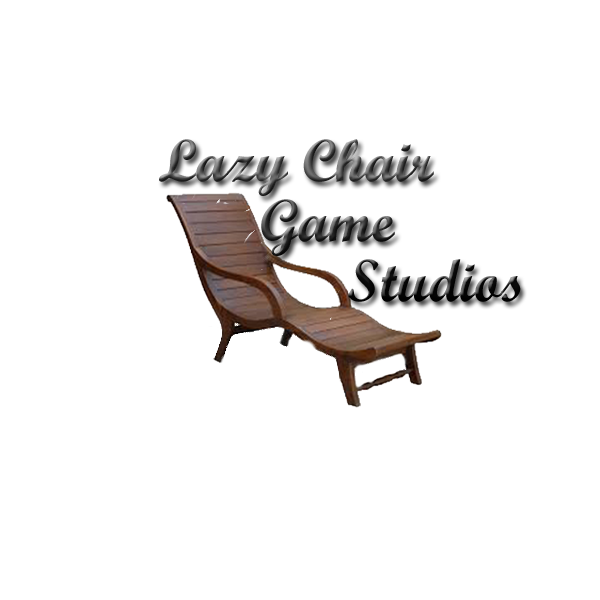
<style>
.page{position:relative;width:600px;height:600px;background:#ffffff}
.page>*{position:absolute;margin:0}
.t1{font:60px/60px "ScriptMTBold"}
</style>
<div class="page">
<p class="t1" style="left:159px;top:139px;width:362px;height:163px">Lazy Chair<br>    Game    <br>       Studios</p>
</div>
